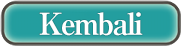
<style>
.page{position:relative;width:181px;height:46px}
.page>*{position:absolute;margin:0}
.t1{font:30px "RyuminPro-ExBold";letter-spacing:-0.08em;color:#ffffff}
</style>
<div class="page">
<p class="t1" style="left:39px;top:12px;width:104px;height:24px">Kembali</p>
</div>
